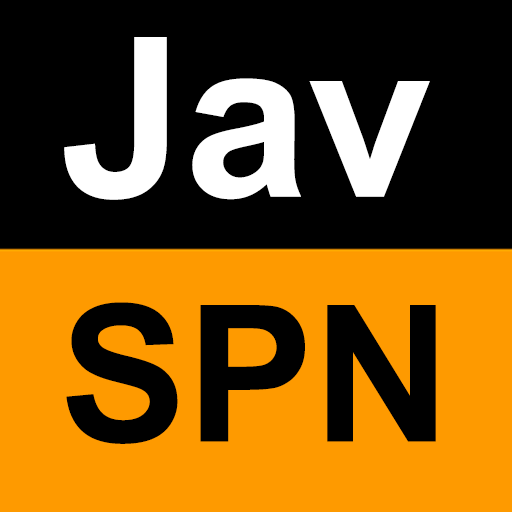
<style>
.page{position:relative;width:512px;height:512px;background:#000000}
.page>*{position:absolute;margin:0}
.t1{font:222.7px "Arial-BoldMT";color:#ffffff}
.t2{font:190.1px "Arial-BoldMT";color:#000000}
</style>
<div class="page">
<p class="t1" style="left:64px;top:37px;width:366px;height:163px">Jav</p>
<p class="t2" style="left:66px;top:302px;width:370px;height:142px">SPN</p>
</div>
